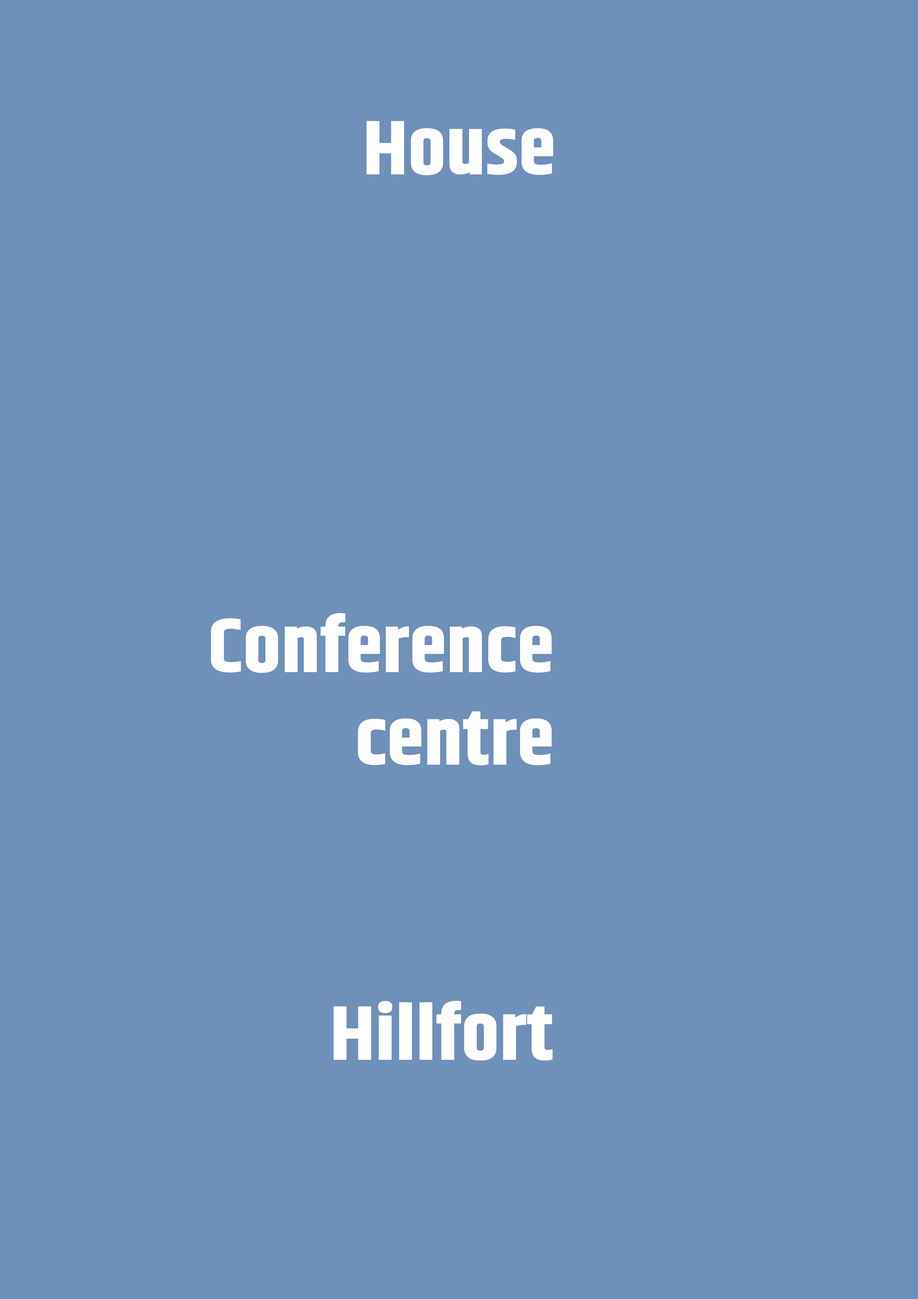
<style>
.page{position:relative;width:918px;height:1299px;background:#6f90b8}
.page>*{position:absolute;margin:0}
.t1{font:77.1px "Khand-Bold";color:#ffffff;scale:1.1 1}
</style>
<div class="page">
<p class="t1" style="left:211px;top:613px;width:341px;height:152px;text-align:right">Conference centre</p>
<p class="t1" style="left:334px;top:1000px;width:219px;height:61px">Hillfort</p>
</div>
